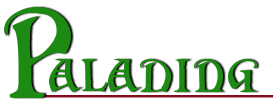
<style>
.page{position:relative;width:276px;height:110px;background:#ffffff}
.page>*{position:absolute;margin:0}
.t1{font:92.8px "Darkenstone";letter-spacing:0.08em;color:#1c8a13;font-variant:small-caps;scale:0.86 1}
.t2{font:34px "Darkenstone";color:#1c8a13}
.t3{font:30px "ComicSansMS";color:#800c1f;font-variant:small-caps;font-weight:bold;font-style:italic}
</style>
<div class="page">
<p class="t1" style="left:4px;top:7px;width:67px;height:91px">P</p>
<p class="t2" style="left:49px;top:59px;width:208px;height:33px">alading</p>
<p class="t3" style="left:15px;top:95px;width:259px;height:3px">_____________</p>
</div>
